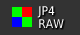
<style>
.page{position:relative;width:80px;height:35px;background:#333333}
.page>*{position:absolute;margin:0}
.t1{font:12px/13.1px "DejaVuSansCondensed";color:#ffffff}
</style>
<div class="page">
<p class="t1" style="left:37px;top:6px;width:27px;height:22px">JP4 <br>RAW</p>
</div>
